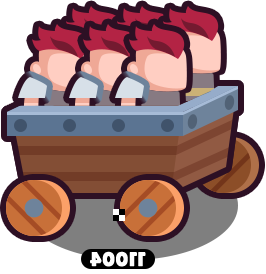
<style>
.page{position:relative;width:266px;height:274px;background:#ffffff}
.page>*{position:absolute;margin:0}
.t1{font:20px "LilitaOne";color:#ffffff;font-weight:bold}
</style>
<div class="page">
<p class="t1" style="left:90px;top:251px;width:56px;height:16px;rotate:180deg">11004</p>
</div>
